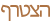
<style>
.page{position:relative;width:51px;height:22px;background:#ffffff}
.page>*{position:absolute;margin:0}
.t1{font:21.6px "MyriadHebrew-Regular";letter-spacing:-0.09em;color:#ad7344}
</style>
<div class="page">
<p class="t1" style="left:1px;top:4px;width:49px;height:17px">ףרטצה</p>
</div>
